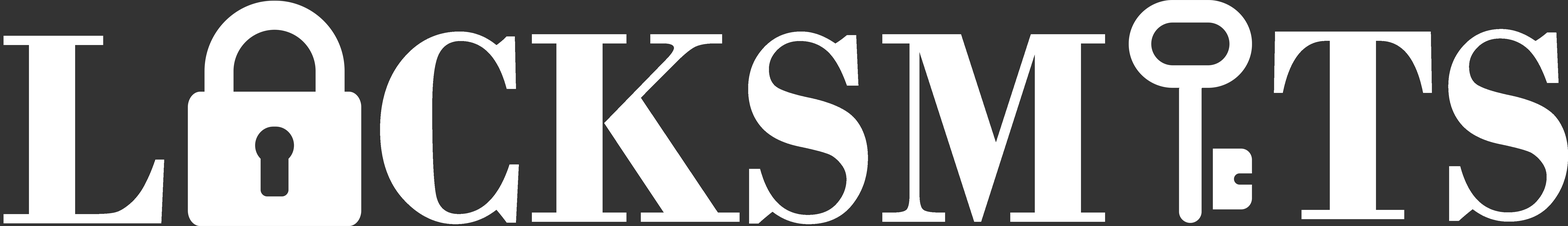
<style>
.page{position:relative;width:1568px;height:226px;background:#333333}
.page>*{position:absolute;margin:0}
.t1{font:286.4px "BodoniMT-Bold";color:#ffffff}
</style>
<div class="page">
<p class="t1" style="left:1274px;top:29px;width:294px;height:193px">TS</p>
<p class="t1" style="left:4px;top:36px;width:160px;height:188px">L</p>
<p class="t1" style="left:380px;top:32px;width:725px;height:193px">CKSM</p>
</div>
